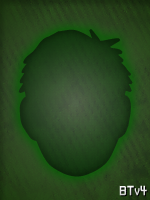
<style>
.page{position:relative;width:150px;height:200px}
.page>*{position:absolute;margin:0}
.t1{font:16px "DevGothic";color:#e6e6e6}
.t2{font:12px "DevGothic";color:#e6e6e6}
</style>
<div class="page">
<p class="t1" style="left:119px;top:185px;width:28px;height:11px">BT<span class="t2">v</span>4</p>
</div>
